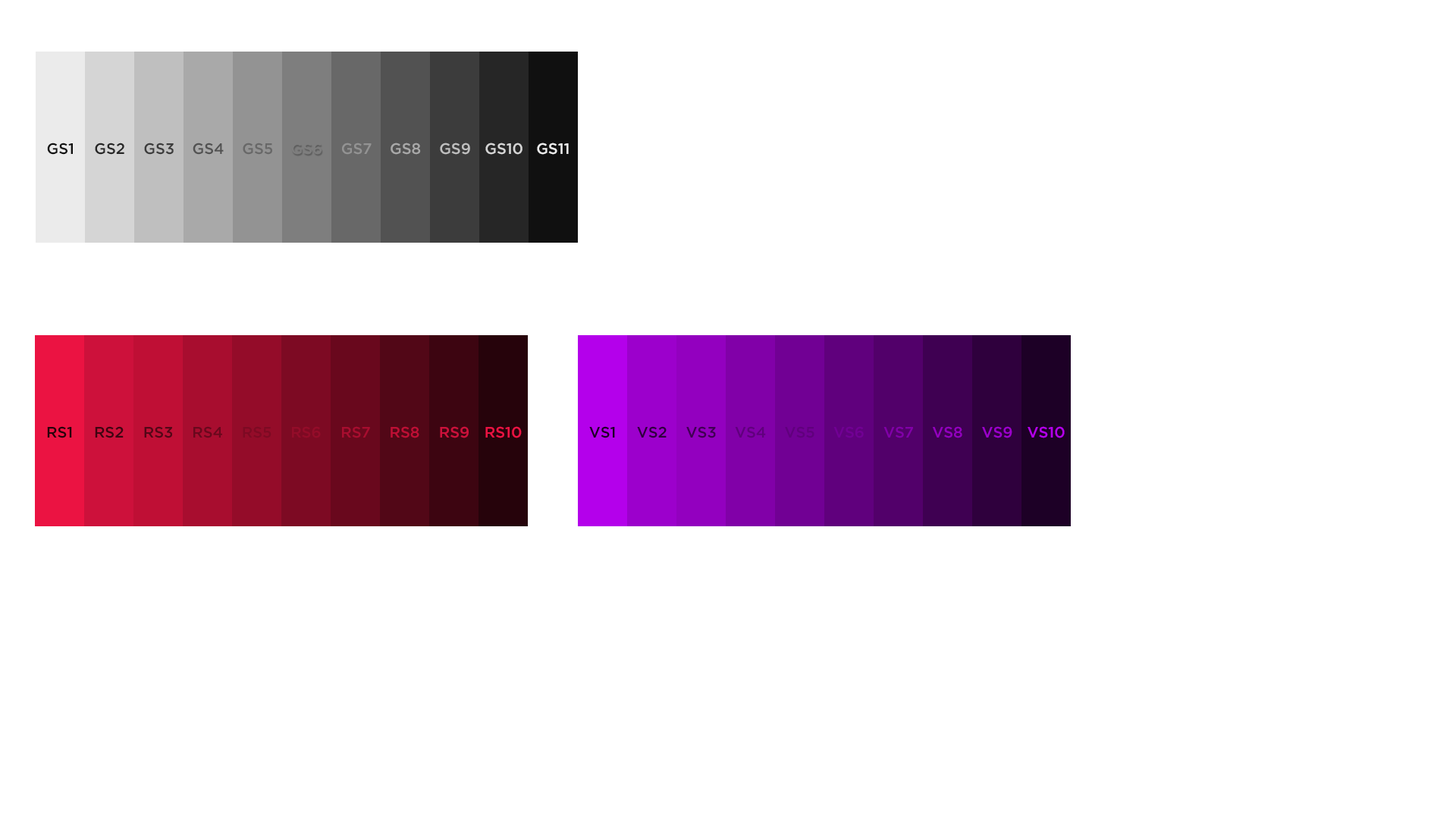
<style>
.page{position:relative;width:1456px;height:819px;background:#ffffff}
.page>*{position:absolute;margin:0}
.t1{font:15.2px "GothamPro-Medium";color:#101010}
.t2{font:15.2px "GothamPro-Medium";color:#262626}
.t3{font:15.2px "GothamPro-Medium";color:#3c3c3c}
.t4{font:15.2px "GothamPro-Medium";color:#525252}
.t5{font:15.2px "GothamPro-Medium";color:#686868}
.t6{font:15.2px "GothamPro-Medium";color:#7e7e7e}
.t7{font:15.2px "GothamPro-Medium";color:#939393}
.t8{font:15.2px "GothamPro-Medium";color:#a9a9a9}
.t9{font:15.2px "GothamPro-Medium";color:#bfbfbf}
.t10{font:15.2px "GothamPro-Medium";color:#d5d5d5}
.t11{font:15.2px "GothamPro-Medium";color:#ebebeb}
.t12{font:15.2px "GothamPro-Medium";color:#26030b}
.t13{font:15.2px "GothamPro-Medium";color:#3d0511}
.t14{font:15.2px "GothamPro-Medium";color:#520717}
.t15{font:15.2px "GothamPro-Medium";color:#69081d}
.t16{font:15.2px "GothamPro-Medium";color:#7d0a23}
.t17{font:15.2px "GothamPro-Medium";color:#940c29}
.t18{font:15.2px "GothamPro-Medium";color:#a80d2f}
.t19{font:15.2px "GothamPro-Medium";color:#bf0f35}
.t20{font:15.2px "GothamPro-Medium";color:#cd113b}
.t21{font:15.2px "GothamPro-Medium";color:#eb1342}
.t22{font:15.2px "GothamPro-Medium";color:#1d0026}
.t23{font:15.2px "GothamPro-Medium";color:#2f003d}
.t24{font:15.2px "GothamPro-Medium";color:#3f0052}
.t25{font:15.2px "GothamPro-Medium";color:#60007d}
.t26{font:15.2px "GothamPro-Medium";color:#710094}
.t27{font:15.2px "GothamPro-Medium";color:#8100a8}
.t28{font:15.2px "GothamPro-Medium";color:#9300bf}
.t29{font:15.2px "GothamPro-Medium";color:#9c00cc}
.t30{font:15.2px "GothamPro-Medium";color:#b400eb}
</style>
<div class="page">
<p class="t1" style="left:47px;top:143px;width:26px;height:12px">GS1</p>
<p class="t2" style="left:95px;top:143px;width:29px;height:12px">GS2</p>
<p class="t3" style="left:144px;top:143px;width:30px;height:12px">GS3</p>
<p class="t4" style="left:193px;top:143px;width:31px;height:12px">GS4</p>
<p class="t5" style="left:243px;top:143px;width:29px;height:12px">GS5</p>
<p class="t6" style="left:291px;top:143px;width:31px;height:12px">GS6</p>
<p class="t7" style="left:342px;top:143px;width:30px;height:12px">GS7</p>
<p class="t8" style="left:391px;top:143px;width:30px;height:12px">GS8</p>
<p class="t9" style="left:440px;top:143px;width:30px;height:12px">GS9</p>
<p class="t10" style="left:485px;top:143px;width:37px;height:12px">GS10</p>
<p class="t11" style="left:537px;top:143px;width:32px;height:12px">GS11</p>
<p class="t12" style="left:47px;top:426px;width:25px;height:12px">RS1</p>
<p class="t13" style="left:95px;top:426px;width:29px;height:12px">RS2</p>
<p class="t14" style="left:144px;top:426px;width:28px;height:12px">RS3</p>
<p class="t15" style="left:193px;top:426px;width:29px;height:12px">RS4</p>
<p class="t16" style="left:243px;top:426px;width:28px;height:12px">RS5</p>
<p class="t17" style="left:292px;top:426px;width:29px;height:12px">RS6</p>
<p class="t18" style="left:342px;top:426px;width:28px;height:12px">RS7</p>
<p class="t19" style="left:391px;top:426px;width:28px;height:12px">RS8</p>
<p class="t20" style="left:440px;top:426px;width:29px;height:12px">RS9</p>
<p class="t21" style="left:485px;top:426px;width:37px;height:12px">RS10</p>
<p class="t22" style="left:589px;top:426px;width:26px;height:12px">VS1</p>
<p class="t23" style="left:637px;top:426px;width:30px;height:12px">VS2</p>
<p class="t24" style="left:686px;top:426px;width:30px;height:12px">VS3</p>
<p class="t25" style="left:735px;top:426px;width:31px;height:12px">VS4</p>
<p class="t25" style="left:785px;top:426px;width:29px;height:12px">VS5</p>
<p class="t26" style="left:833px;top:426px;width:31px;height:12px">VS6</p>
<p class="t27" style="left:883px;top:426px;width:30px;height:12px">VS7</p>
<p class="t28" style="left:933px;top:426px;width:29px;height:12px">VS8</p>
<p class="t29" style="left:982px;top:426px;width:30px;height:12px">VS9</p>
<p class="t30" style="left:1028px;top:426px;width:37px;height:12px">VS10</p>
</div>
